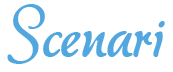
<style>
.page{position:relative;width:173px;height:72px;background:#ffffff}
.page>*{position:absolute;margin:0}
.t1{font:64px "akaDora";color:#52a7df}
</style>
<div class="page">
<p class="t1" style="left:7px;top:4px;width:158px;height:60px">Scenari</p>
</div>
